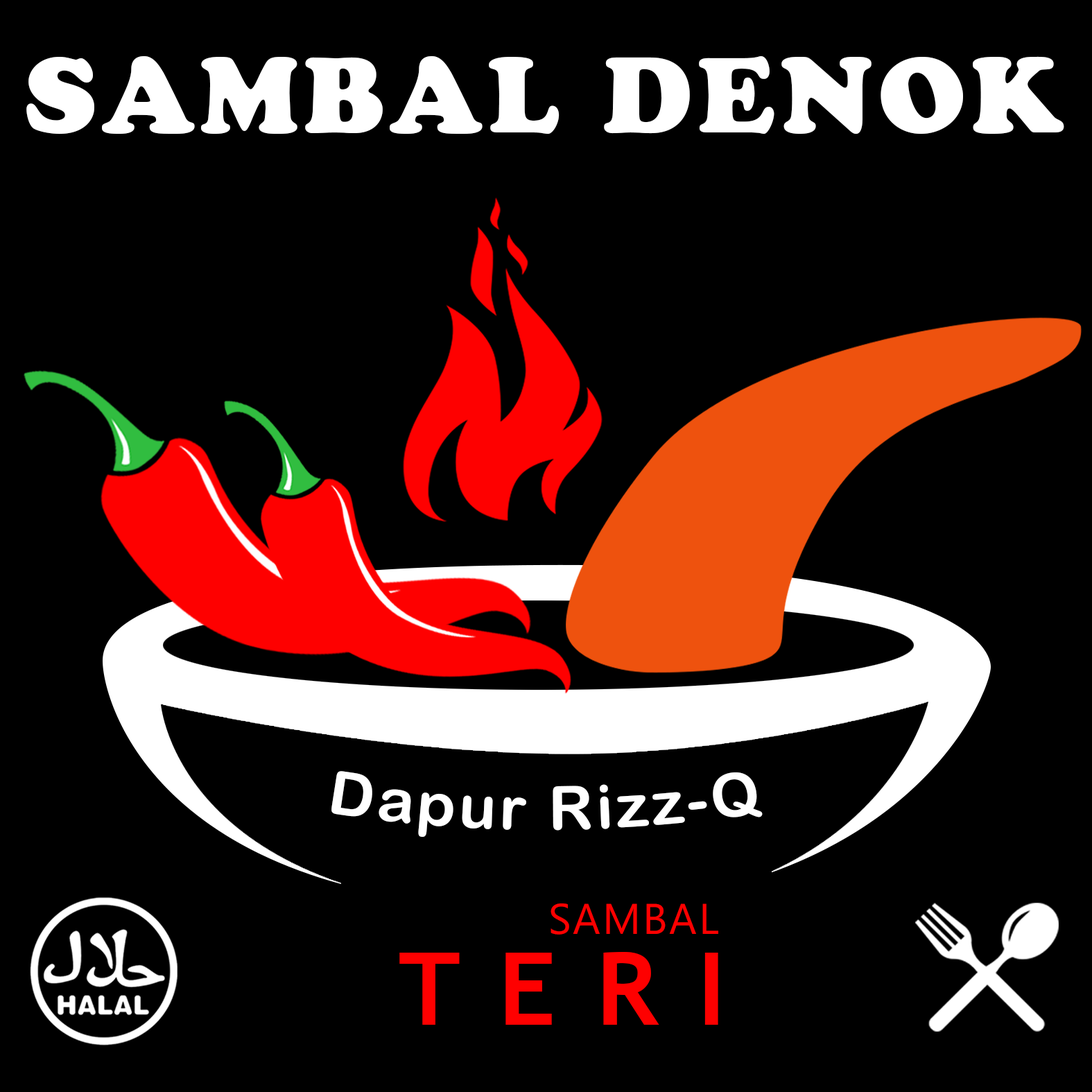
<style>
.page{position:relative;width:1092px;height:1092px;background:#000000}
.page>*{position:absolute;margin:0}
.t1{font:105.9px "CooperBlackStd";letter-spacing:0.05em;color:#ffffff}
.t2{font:60px "ArialRoundedMTBold";letter-spacing:0.05em;color:#ffffff}
.t3{font:42.8px "Ebrima";letter-spacing:0.05em;color:#fe0000}
.t4{font:100.3px "TrebuchetMS-Bold";letter-spacing:0.05em;color:#fe0000}
</style>
<div class="page">
<p class="t1" style="left:26px;top:56px;width:1038px;height:79px">SAMBAL DENOK</p>
<p class="t2" style="left:331px;top:771px;width:432px;height:66px">Dapur Rizz-Q</p>
<p class="t3" style="left:550px;top:903px;width:168px;height:32px">SAMBAL</p>
<p class="t4" style="left:399px;top:952px;width:319px;height:73px">T E R I</p>
</div>
